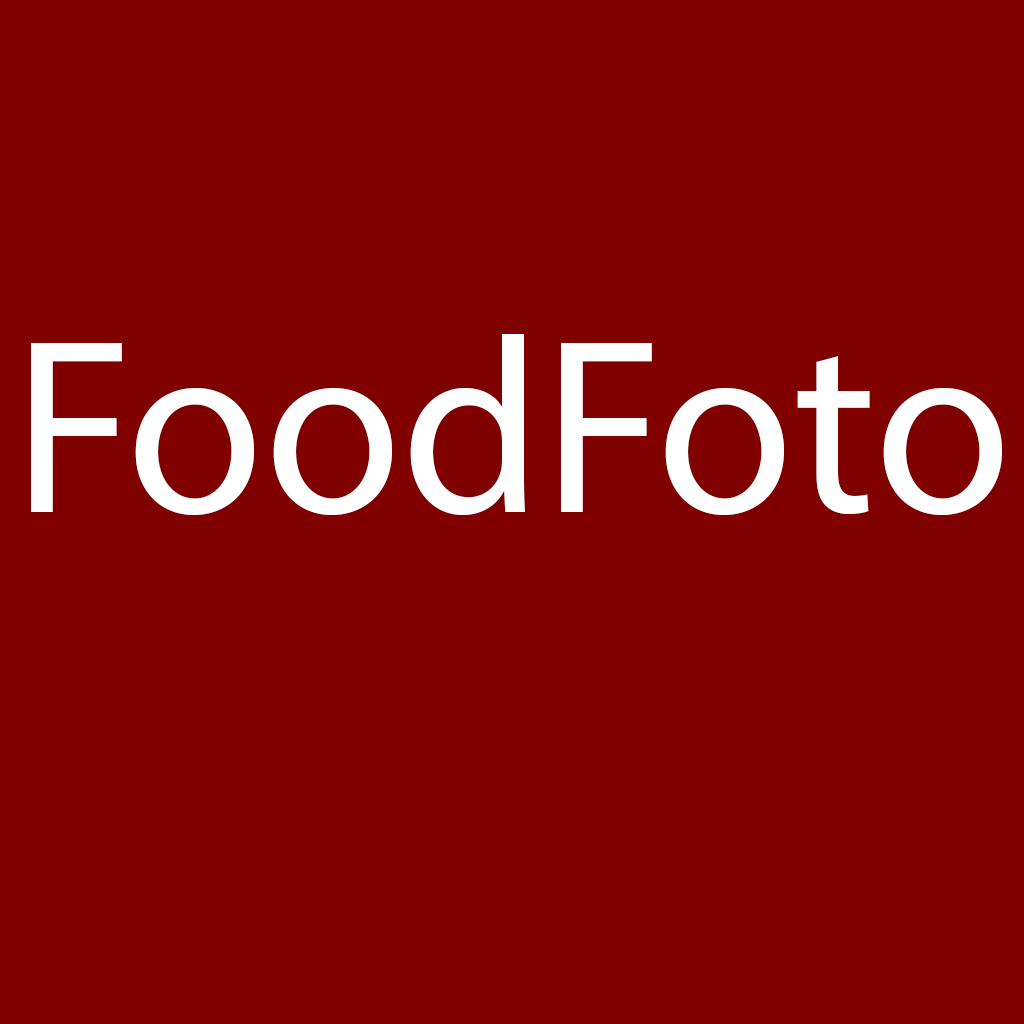
<style>
.page{position:relative;width:1024px;height:1024px;background:#800000}
.page>*{position:absolute;margin:0}
.t1{font:250px "MyriadPro-Regular";color:#ffffff}
</style>
<div class="page">
<p class="t1" style="left:31px;top:334px;width:971px;height:181px">FoodFoto</p>
</div>
